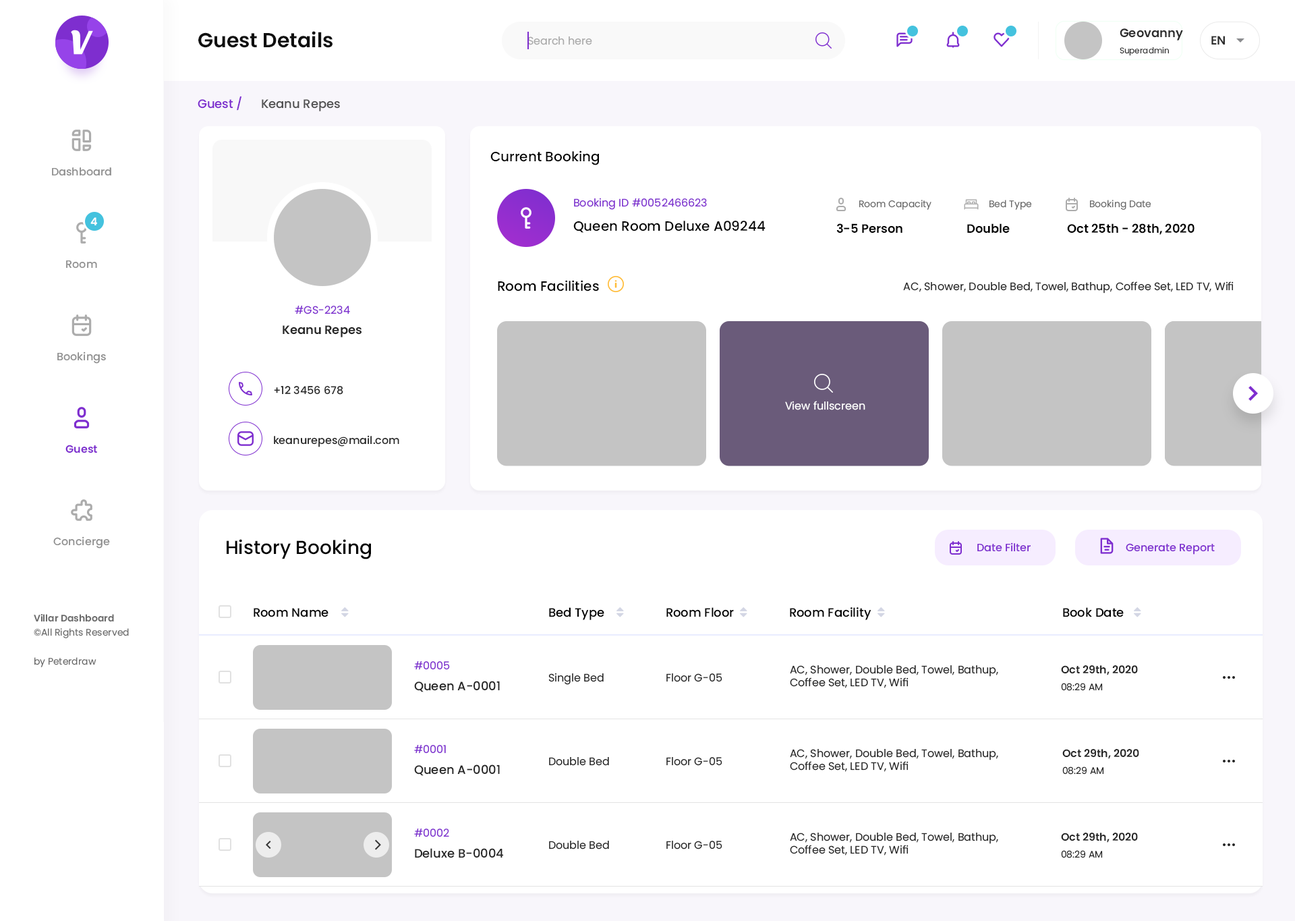
<style>
.page{position:relative;width:1295px;height:921px;background:#ffffff}
.page>*{position:absolute;margin:0}
.t1{font:12.1px "Poppins-SemiBold";color:#2e2e2e}
.t2{font:20.2px "Poppins-SemiBold";color:#0f0f0f}
.t3{font:10.8px "Poppins-Regular";color:#aaaaaa}
.t4{font:8.1px "Poppins-Regular";color:#2e2e2e}
.t5{font:12.1px "Poppins-Medium";color:#7e2ecf}
.t6{font:12.1px "Poppins-Medium";color:#525252}
.t7{font:13.5px "Poppins-Medium";color:#000000}
.t8{font:10.8px "Poppins-Medium";color:#8f8f8f}
.t9{font:10.8px "Poppins-Regular";color:#7e2ecf}
.t10{font:9.4px "Poppins-Regular";color:#686868}
.t11{font:10.8px "Poppins-SemiBold";color:#ffffff}
.t12{font:12.1px "Poppins-SemiBold";color:#000000}
.t13{font:10.8px "Poppins-Regular";color:#262626}
.t14{font:12.1px "Poppins-SemiBold";color:#262626}
.t15{font:10.8px "Poppins-Medium";color:#262626}
.t16{font:10.8px "Poppins-Regular";color:#ffffff}
.t17{font:10.8px "Poppins-SemiBold";color:#7e2ecf}
.t18{font:18.9px "Poppins-Medium";color:#000000}
.t19{font:10.8px "Poppins-Medium";color:#7e2ecf}
.t20{font:9.4px "Poppins-SemiBold";color:#6b6b6b}
.t21{font:12.1px "Poppins-Medium";color:#000000}
.t22{font:9.4px "Poppins-Regular";color:#6b6b6b}
.t23{font:10.8px "Poppins-SemiBold";color:#262626}
.t24{font:12.1px "Poppins-Medium";color:#262626}
.t25{font:9.4px "Poppins-Regular";color:#262626}
</style>
<div class="page">
<p class="t1" style="left:1120px;top:28px;width:63px;height:12px">Geovanny</p>
<p class="t2" style="left:198px;top:31px;width:135px;height:17px">Guest Details</p>
<p class="t3" style="left:527px;top:36px;width:65px;height:9px">Search here</p>
<p class="t1" style="left:1211px;top:36px;width:14px;height:9px">EN</p>
<p class="t4" style="left:1120px;top:47px;width:49px;height:9px">Superadmin</p>
<p class="t5" style="left:198px;top:96px;width:43px;height:15px">Guest /</p>
<p class="t6" style="left:262px;top:99px;width:78px;height:12px">Keanu Repes</p>
<p class="t7" style="left:490px;top:150px;width:109px;height:15px">Current Booking</p>
<p class="t8" style="left:52px;top:167px;width:59px;height:9px">Dashboard</p>
<p class="t9" style="left:574px;top:198px;width:133px;height:12px">Booking ID #0052466623</p>
<p class="t10" style="left:859px;top:200px;width:73px;height:10px">Room Capacity</p>
<p class="t10" style="left:990px;top:200px;width:42px;height:10px">Bed Type</p>
<p class="t10" style="left:1090px;top:200px;width:61px;height:10px">Booking Date</p>
<p class="t11" style="left:90px;top:217px;width:7px;height:8px">4</p>
<p class="t7" style="left:573px;top:221px;width:193px;height:12px">Queen Room Deluxe A09244</p>
<p class="t12" style="left:836px;top:223px;width:67px;height:10px">3-5 Person</p>
<p class="t12" style="left:967px;top:223px;width:43px;height:10px">Double</p>
<p class="t12" style="left:1067px;top:223px;width:128px;height:12px">Oct 25th - 28th, 2020</p>
<p class="t8" style="left:66px;top:260px;width:31px;height:8px">Room</p>
<p class="t7" style="left:498px;top:280px;width:101px;height:11px">Room Facilities</p>
<p class="t13" style="left:903px;top:281px;width:331px;height:12px">AC, Shower, Double Bed, Towel, Bathup, Coffee Set, LED TV, Wifi</p>
<p class="t9" style="left:295px;top:306px;width:55px;height:8px">#GS-2234</p>
<p class="t14" style="left:283px;top:325px;width:79px;height:12px">Keanu Repes</p>
<p class="t8" style="left:57px;top:351px;width:49px;height:13px">Bookings</p>
<p class="t15" style="left:274px;top:386px;width:69px;height:9px">+12 3456 678</p>
<p class="t16" style="left:785px;top:401px;width:80px;height:9px">View fullscreen</p>
<p class="t15" style="left:274px;top:435px;width:125px;height:12px">keanurepes@mail.com</p>
<p class="t17" style="left:65px;top:445px;width:32px;height:8px">Guest</p>
<p class="t8" style="left:53px;top:536px;width:57px;height:12px">Concierge</p>
<p class="t18" style="left:227px;top:539px;width:144px;height:20px">History Booking</p>
<p class="t19" style="left:977px;top:542px;width:54px;height:10px">Date Filter</p>
<p class="t19" style="left:1126px;top:543px;width:89px;height:11px">Generate Report</p>
<p class="t20" style="left:34px;top:614px;width:80px;height:8px">Villar Dashboard</p>
<p class="t21" style="left:254px;top:608px;width:74px;height:9px">Room Name</p>
<p class="t21" style="left:549px;top:607px;width:55px;height:13px">Bed Type</p>
<p class="t21" style="left:666px;top:607px;width:68px;height:10px">Room Floor</p>
<p class="t21" style="left:790px;top:607px;width:81px;height:13px">Room Facility</p>
<p class="t21" style="left:1063px;top:607px;width:61px;height:10px">Book Date</p>
<p class="t22" style="left:34px;top:628px;width:95px;height:10px">©All Rights Reserved</p>
<p class="t22" style="left:34px;top:657px;width:62px;height:10px">by Peterdraw</p>
<p class="t9" style="left:414px;top:661px;width:36px;height:9px">#0005</p>
<p class="t13" style="left:790px;top:665px;width:208px;height:23px">AC, Shower, Double Bed, Towel, Bathup, Coffee Set, LED TV, Wifi</p>
<p class="t23" style="left:1061px;top:665px;width:77px;height:10px">Oct 29th, 2020</p>
<p class="t13" style="left:548px;top:673px;width:56px;height:12px">Single Bed</p>
<p class="t13" style="left:666px;top:673px;width:56px;height:9px">Floor G-05</p>
<p class="t24" style="left:414px;top:681px;width:86px;height:11px">Queen A-0001</p>
<p class="t25" style="left:1061px;top:683px;width:42px;height:8px">08:29 AM</p>
<p class="t9" style="left:414px;top:745px;width:32px;height:8px">#0001</p>
<p class="t13" style="left:790px;top:749px;width:208px;height:23px">AC, Shower, Double Bed, Towel, Bathup, Coffee Set, LED TV, Wifi</p>
<p class="t23" style="left:1062px;top:749px;width:77px;height:10px">Oct 29th, 2020</p>
<p class="t13" style="left:549px;top:757px;width:60px;height:9px">Double Bed</p>
<p class="t13" style="left:666px;top:757px;width:56px;height:9px">Floor G-05</p>
<p class="t24" style="left:414px;top:764px;width:86px;height:12px">Queen A-0001</p>
<p class="t25" style="left:1062px;top:766px;width:42px;height:8px">08:29 AM</p>
<p class="t9" style="left:414px;top:828px;width:35px;height:9px">#0002</p>
<p class="t13" style="left:790px;top:832px;width:208px;height:23px">AC, Shower, Double Bed, Towel, Bathup, Coffee Set, LED TV, Wifi</p>
<p class="t23" style="left:1061px;top:832px;width:77px;height:10px">Oct 29th, 2020</p>
<p class="t13" style="left:549px;top:840px;width:60px;height:9px">Double Bed</p>
<p class="t13" style="left:666px;top:840px;width:56px;height:9px">Floor G-05</p>
<p class="t24" style="left:415px;top:848px;width:89px;height:10px">Deluxe B-0004</p>
<p class="t25" style="left:1061px;top:850px;width:42px;height:8px">08:29 AM</p>
</div>
